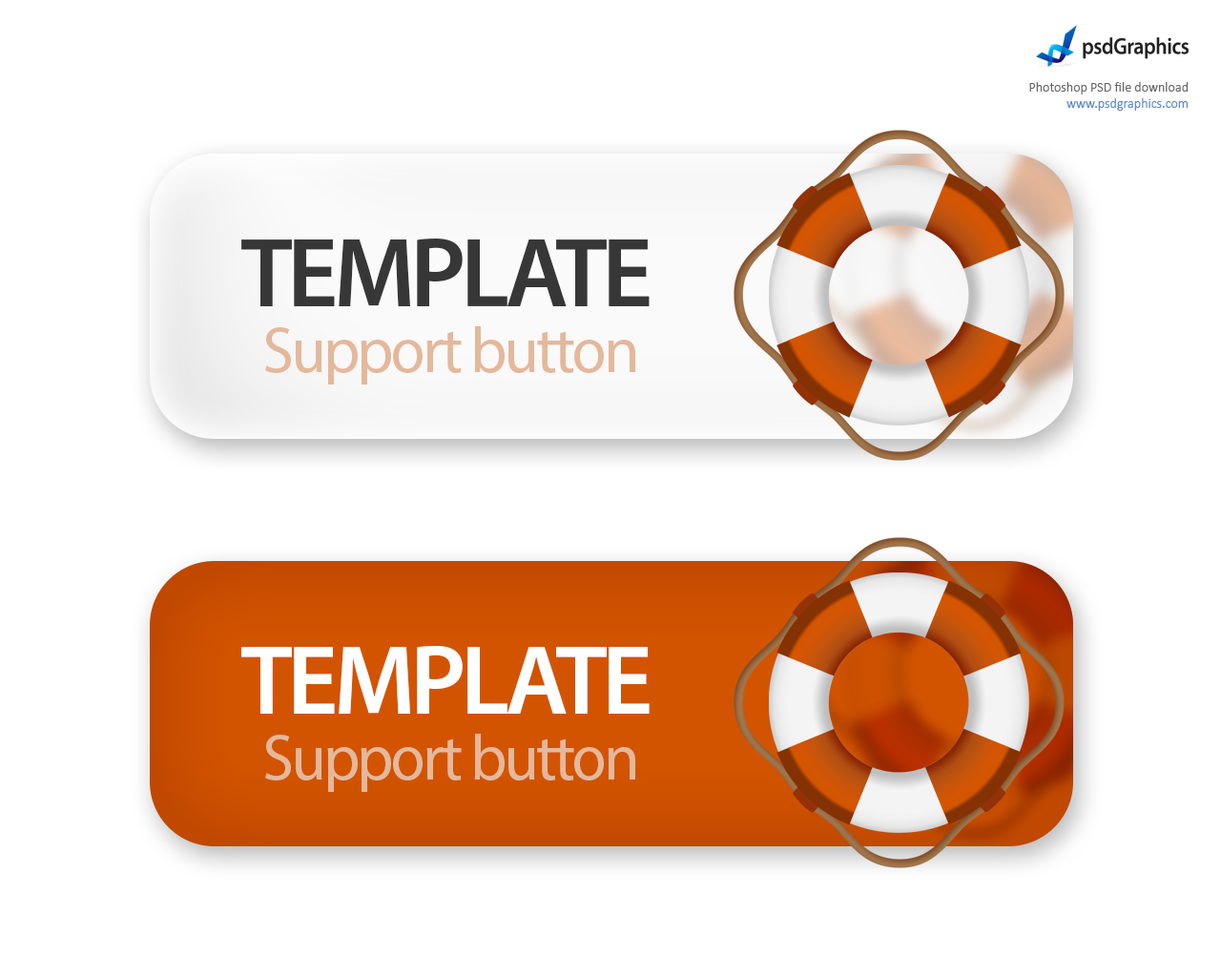
<style>
.page{position:relative;width:1221px;height:977px;background:#ffffff}
.page>*{position:absolute;margin:0}
.t1{font:99.2px "MyriadPro-Semibold";letter-spacing:-0.05em;color:#373737}
.t2{font:64.5px "MyriadPro-Regular";letter-spacing:-0.05em;color:#e4b89b}
.t3{font:99.2px "MyriadPro-Semibold";letter-spacing:-0.05em;color:#ffffff}
</style>
<div class="page">
<p class="t1" style="left:241px;top:238px;width:409px;height:68px">TEMPLATE</p>
<p class="t2" style="left:265px;top:326px;width:370px;height:58px">Support button</p>
<p class="t3" style="left:241px;top:646px;width:409px;height:67px">TEMPLATE</p>
<p class="t2" style="left:265px;top:733px;width:370px;height:59px">Support button</p>
</div>
